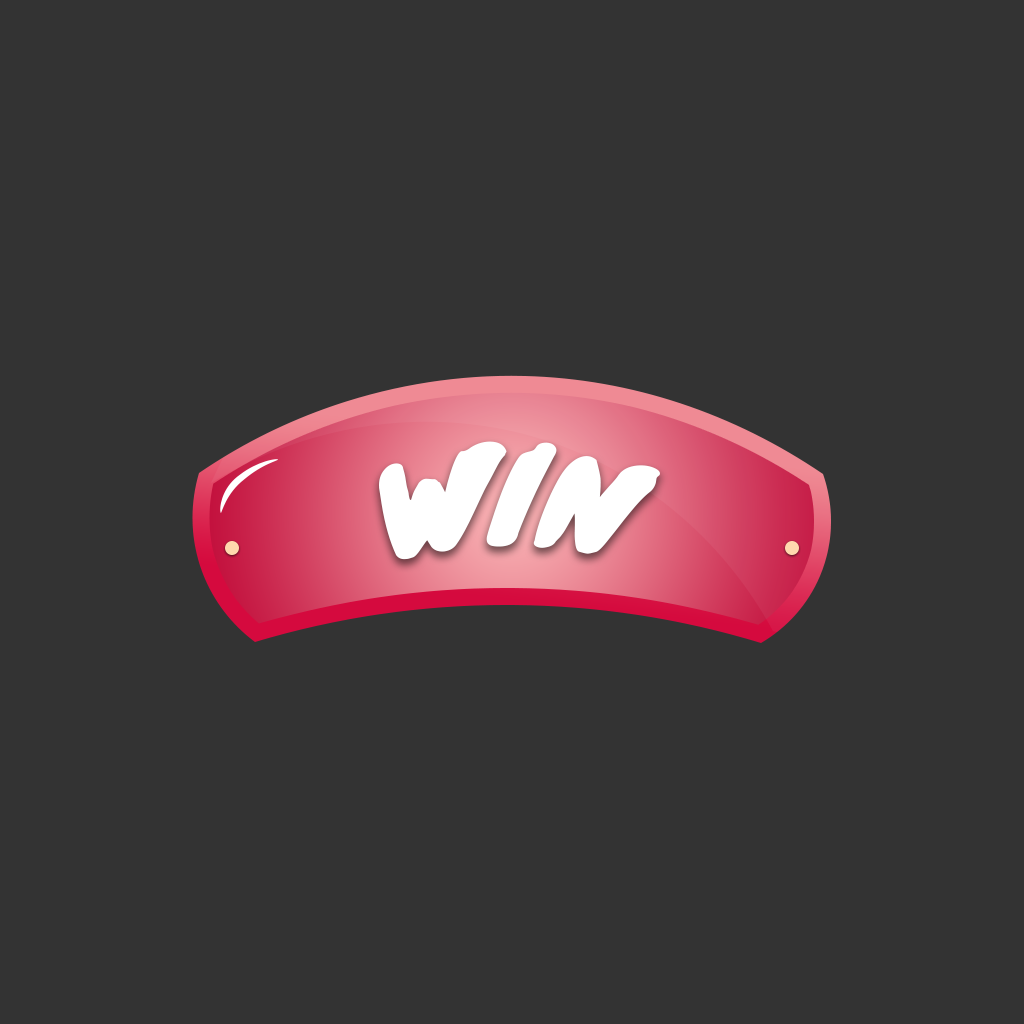
<style>
.page{position:relative;width:1024px;height:1024px;background:#333333}
.page>*{position:absolute;margin:0}
.t1{font:125.3px "Knewave-Regular";color:#ffffff;scale:0.88 1}
</style>
<div class="page">
<p class="t1" style="left:379px;top:441px;width:281px;height:119px">WIN</p>
</div>
